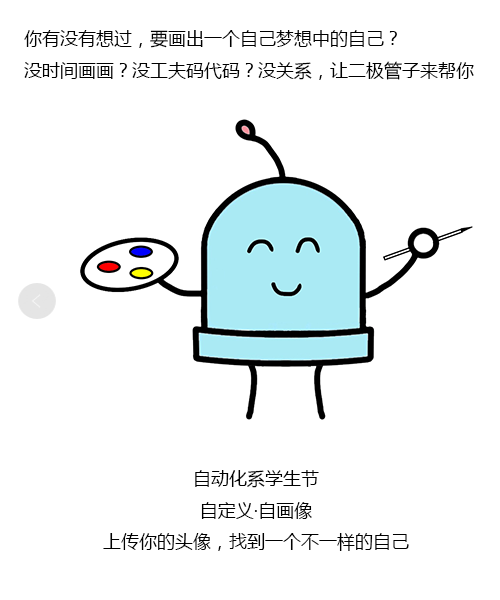
<style>
.page{position:relative;width:500px;height:600px;background:#ffffff}
.page>*{position:absolute;margin:0}
.t1{font:18px "MicrosoftYaHei";color:#000000}
</style>
<div class="page">
<p class="t1" style="left:24px;top:30px;width:450px;height:50px">你有没有想过，要画出一个自己梦想中的自己？<br>没时间画画？没工夫码代码？没关系，让二极管子来帮你</p>
<p class="t1" style="left:103px;top:470px;width:306px;height:81px;text-align:center">自动化系学生节<br>自定义·自画像<br>上传你的头像，找到一个不一样的自己</p>
</div>
